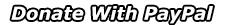
<style>
.page{position:relative;width:250px;height:25px;background:#ffffff}
.page>*{position:absolute;margin:0}
.t1{font:18px "Verdana-BoldItalic";color:#ffffff}
</style>
<div class="page">
<p class="t1" style="left:11px;top:6px;width:202px;height:18px">Donate With PayPal</p>
</div>
